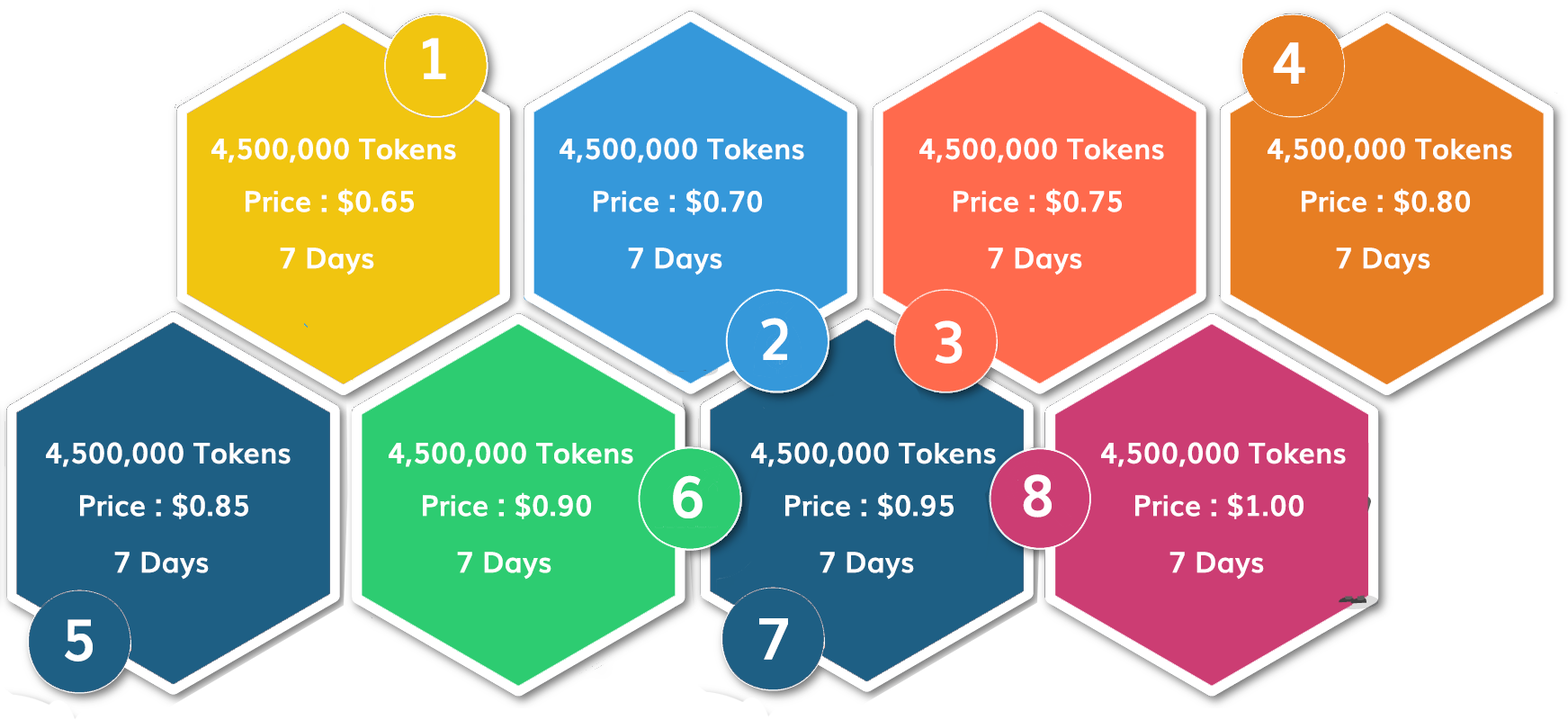
<style>
.page{position:relative;width:1568px;height:720px;background:#ffffff}
.page>*{position:absolute;margin:0}
.t1{font:57.6px "Muli-Bold";color:#ffffff}
.t2{font:28.8px "Muli-Bold";color:#ffffff}
</style>
<div class="page">
<p class="t1" style="left:423px;top:38px;width:23px;height:41px">1</p>
<p class="t1" style="left:1273px;top:42px;width:32px;height:42px">4</p>
<p class="t2" style="left:211px;top:138px;width:245px;height:25px">4,500,000 Tokens</p>
<p class="t2" style="left:560px;top:138px;width:244px;height:25px">4,500,000 Tokens</p>
<p class="t2" style="left:919px;top:138px;width:245px;height:25px">4,500,000 Tokens</p>
<p class="t2" style="left:1268px;top:138px;width:244px;height:25px">4,500,000 Tokens</p>
<p class="t2" style="left:246px;top:188px;width:168px;height:27px">Price : $0.65</p>
<p class="t2" style="left:594px;top:188px;width:168px;height:27px">Price : $0.70</p>
<p class="t2" style="left:954px;top:188px;width:168px;height:27px">Price : $0.75</p>
<p class="t2" style="left:1302px;top:188px;width:168px;height:27px">Price : $0.80</p>
<p class="t2" style="left:280px;top:247px;width:94px;height:28px">7 Days</p>
<p class="t2" style="left:628px;top:247px;width:94px;height:28px">7 Days</p>
<p class="t2" style="left:988px;top:247px;width:94px;height:28px">7 Days</p>
<p class="t2" style="left:1336px;top:247px;width:94px;height:28px">7 Days</p>
<p class="t1" style="left:761px;top:318px;width:27px;height:42px">2</p>
<p class="t1" style="left:935px;top:320px;width:28px;height:43px">3</p>
<p class="t2" style="left:46px;top:442px;width:245px;height:25px">4,500,000 Tokens</p>
<p class="t2" style="left:389px;top:442px;width:244px;height:25px">4,500,000 Tokens</p>
<p class="t2" style="left:751px;top:442px;width:245px;height:25px">4,500,000 Tokens</p>
<p class="t2" style="left:1101px;top:442px;width:245px;height:25px">4,500,000 Tokens</p>
<p class="t1" style="left:673px;top:475px;width:30px;height:43px">6</p>
<p class="t1" style="left:1023px;top:474px;width:29px;height:43px">8</p>
<p class="t2" style="left:80px;top:492px;width:168px;height:27px">Price : $0.85</p>
<p class="t2" style="left:423px;top:492px;width:168px;height:27px">Price : $0.90</p>
<p class="t2" style="left:785px;top:492px;width:169px;height:27px">Price : $0.95</p>
<p class="t2" style="left:1135px;top:492px;width:169px;height:27px">Price : $1.00</p>
<p class="t2" style="left:114px;top:551px;width:95px;height:28px">7 Days</p>
<p class="t2" style="left:457px;top:551px;width:94px;height:28px">7 Days</p>
<p class="t2" style="left:820px;top:551px;width:94px;height:28px">7 Days</p>
<p class="t2" style="left:1169px;top:551px;width:95px;height:28px">7 Days</p>
<p class="t1" style="left:65px;top:619px;width:28px;height:42px">5</p>
<p class="t1" style="left:759px;top:618px;width:29px;height:41px">7</p>
</div>
